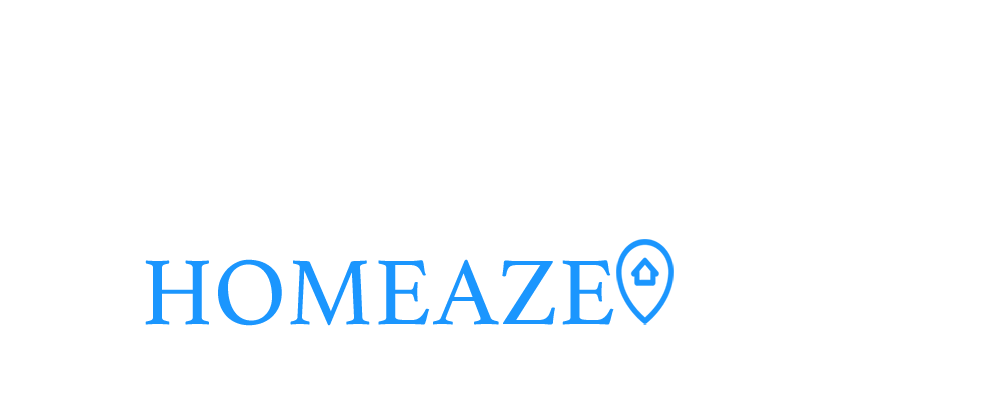
<style>
.page{position:relative;width:998px;height:412px;background:#ffffff}
.page>*{position:absolute;margin:0}
.t1{font:97.1px "Athelas-Regular";color:#1b96fe}
</style>
<div class="page">
<p class="t1" style="left:145px;top:259px;width:469px;height:67px">HOMEAZE</p>
</div>
